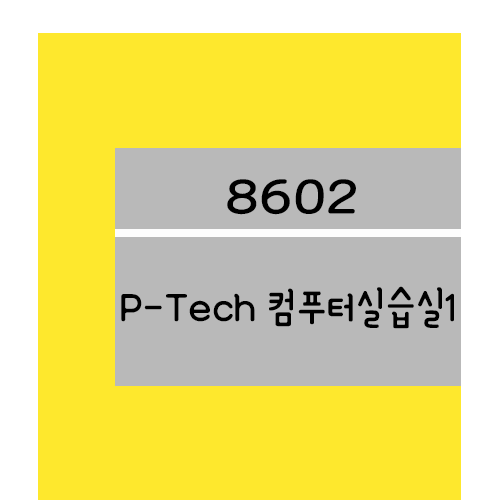
<style>
.page{position:relative;width:500px;height:500px;background:#fee82d}
.page>*{position:absolute;margin:0}
.t1{font:61.2px "YanoljaYacheR";color:#000000;scale:1.18 1}
.t2{font:48px "YanoljaYacheR";color:#000000}
</style>
<div class="page">
<p class="t1" style="left:227px;top:179px;width:129px;height:36px">8602</p>
<p class="t2" style="left:121px;top:286px;width:333px;height:43px">P-Tech 컴푸터실습실1</p>
</div>
